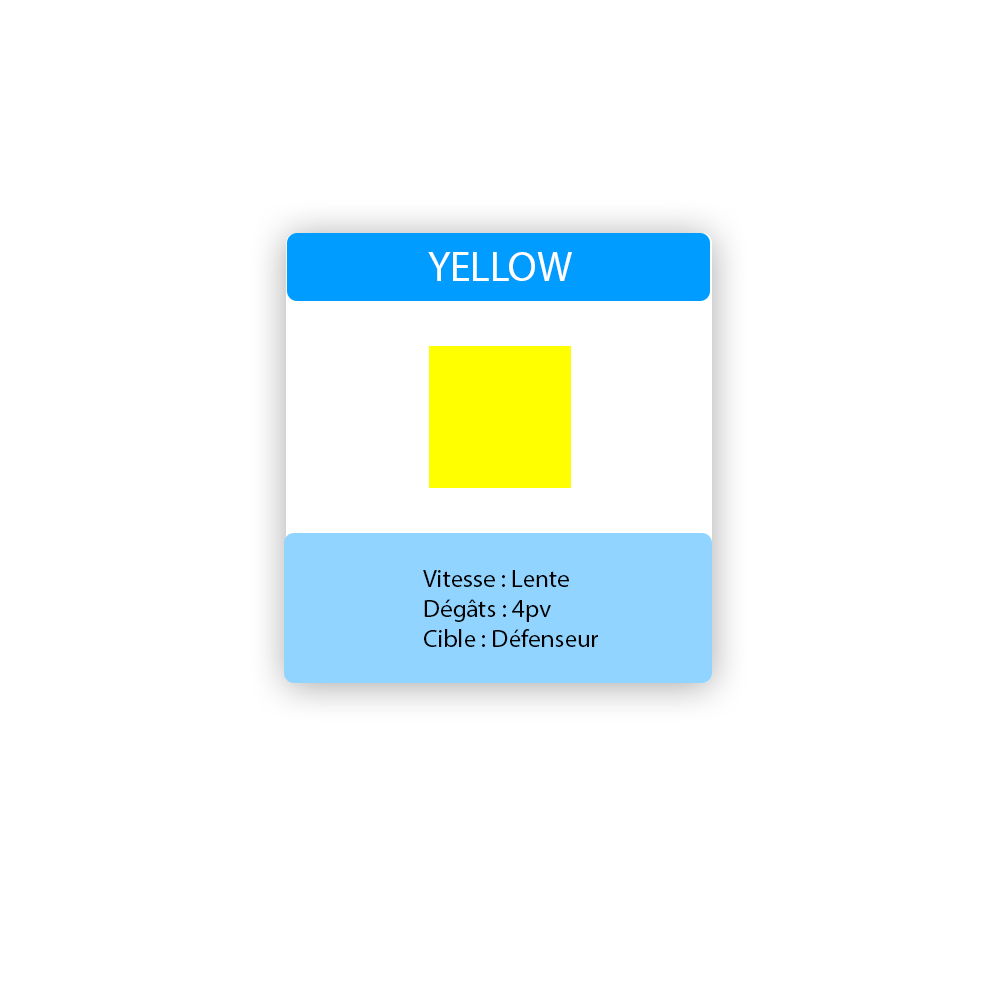
<style>
.page{position:relative;width:1000px;height:1000px;background:#ffffff}
.page>*{position:absolute;margin:0}
.t1{font:41.7px "MyriadPro-Regular";color:#ffffff}
.t2{font:25px "MyriadPro-Regular";color:#000000}
</style>
<div class="page">
<p class="t1" style="left:428px;top:252px;width:144px;height:29px">YELLOW</p>
<p class="t2" style="left:423px;top:570px;width:175px;height:77px">Vitesse : Lente<br>Dégâts : 4pv<br>Cible : Défenseur</p>
</div>
